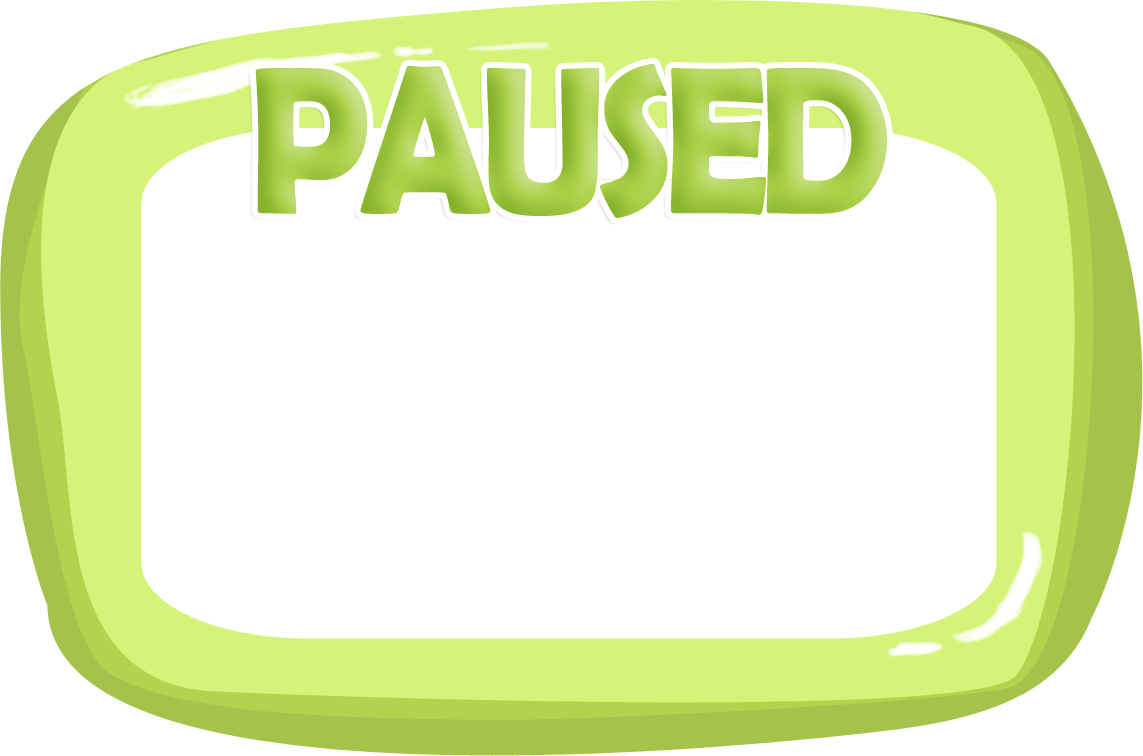
<style>
.page{position:relative;width:1143px;height:756px;background:#ffffff}
.page>*{position:absolute;margin:0}
.t1{font:210.8px "BerlinSansFBDemi-Bold";letter-spacing:-0.06em;color:#abd148;scale:0.89 1}
</style>
<div class="page">
<p class="t1" style="left:255px;top:63px;width:632px;height:155px">PAUSED</p>
</div>
